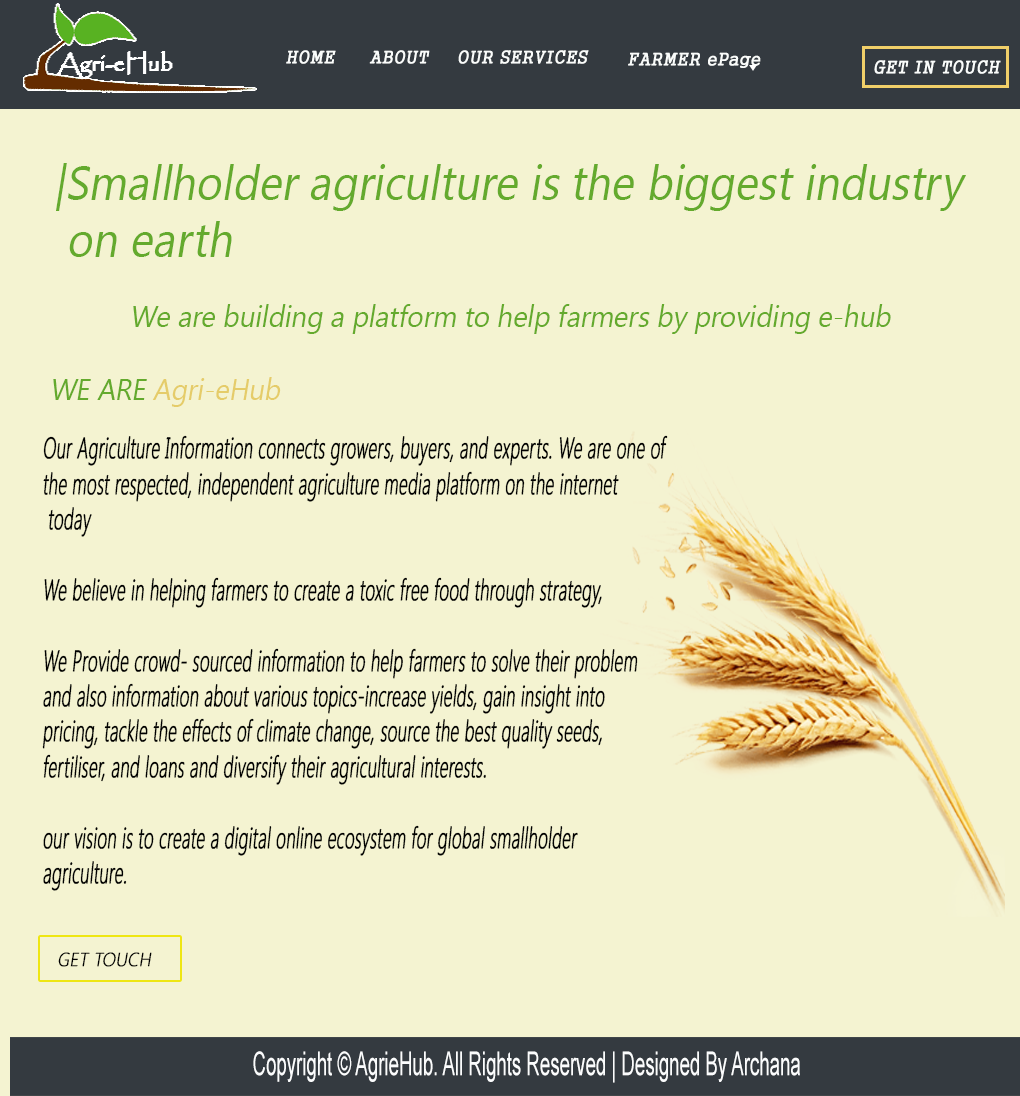
<style>
.page{position:relative;width:1020px;height:1096px;background:#f4f3d1}
.page>*{position:absolute;margin:0}
.t1{font:17.6px "Gungsuh";color:#fafcfb;text-transform:uppercase;font-weight:bold;font-style:italic;scale:0.94 1}
.t2{font:17.6px "Gungsuh";color:#fafcfb;font-weight:bold;font-style:italic;scale:0.94 1}
.t3{font:48px "SegoeUI";color:#64aa2d;font-style:italic;scale:0.92 1}
.t4{font:30px "SegoeUI";color:#64aa2d;font-style:italic;scale:0.92 1}
.t5{font:30px "SegoeUI";color:#e5cc69;font-style:italic;scale:0.92 1}
.t6{font:29.5px "SegoeUI-Light";color:#000000;font-weight:bold;font-style:italic;scale:0.58 1}
.t7{font:19px "SegoeUI-Light";color:#000000;text-transform:uppercase;font-weight:bold;font-style:italic;scale:0.92 1}
.t8{font:33px "ArialMT";color:#fbfcfd;scale:0.57 1}
</style>
<div class="page">
<p class="t1" style="left:286px;top:50px;width:50px;height:14px">Home</p>
<p class="t1" style="left:369px;top:50px;width:61px;height:14px">About</p>
<p class="t1" style="left:458px;top:50px;width:131px;height:14px">OUr services</p>
<p class="t1" style="left:628px;top:52px;width:133px;height:16px">farmer <span class="t2">ePage</span></p>
<p class="t1" style="left:874px;top:60px;width:127px;height:14px">GEt in touch</p>
<p class="t3" style="left:56px;top:163px;width:910px;height:94px">|Smallholder agriculture is the biggest industry<br> on earth</p>
<p class="t4" style="left:133px;top:304px;width:758px;height:30px">We are building a platform to help farmers by providing e-hub</p>
<p class="t5" style="left:53px;top:377px;width:228px;height:30px"><span class="t4">WE ARE </span>Agri-eHub</p>
<p class="t6" style="left:42px;top:435px;width:626px;height:456px">Our Agriculture Information connects growers, buyers, and experts. We are one of<br>the most respected, independent agriculture media platform on the internet<br> today<br><br>We believe in helping farmers to create a toxic free food through strategy, <br><br>We Provide crowd- sourced information to help farmers to solve their problem<br>and also information about various topics-increase yields, gain insight into <br>pricing, tackle the effects of climate change, source the best quality seeds, <br>fertiliser, and loans and diversify their agricultural interests.<br><br>our vision is to create a digital online ecosystem for global smallholder <br>agriculture.</p>
<p class="t7" style="left:58px;top:952px;width:94px;height:15px">Get Touch</p>
<p class="t8" style="left:253px;top:1051px;width:547px;height:32px">Copyright © AgrieHub. All Rights Reserved | Designed By Archana</p>
</div>
